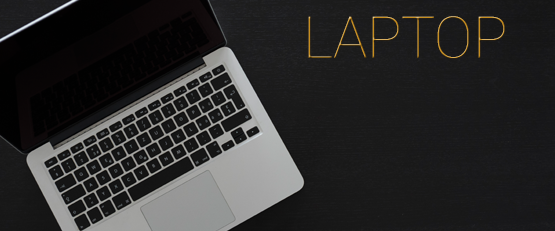
<style>
.page{position:relative;width:555px;height:231px}
.page>*{position:absolute;margin:0}
.t1{font:58px "Roboto-Thin";letter-spacing:-0.01em}
</style>
<div class="page">
<p class="t1" style="left:308px;top:16px;width:197px;height:43px">LAPTOP</p>
</div>
